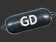
<style>
.page{position:relative;width:56px;height:42px;background:#333333}
.page>*{position:absolute;margin:0}
.t1{font:13.2px "TrebuchetMS-Bold";color:#ededed}
</style>
<div class="page">
<p class="t1" style="left:20px;top:14px;width:17px;height:13px;rotate:-14deg">GD</p>
</div>
